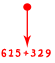
<style>
.page{position:relative;width:55px;height:63px;background:#ffffff}
.page>*{position:absolute;margin:0}
.t1{font:10.7px "KristenITC-Regular";letter-spacing:0.2em;color:#ff0000}
</style>
<div class="page">
<p class="t1" style="left:1px;top:48px;width:50px;height:10px">615+329</p>
</div>
